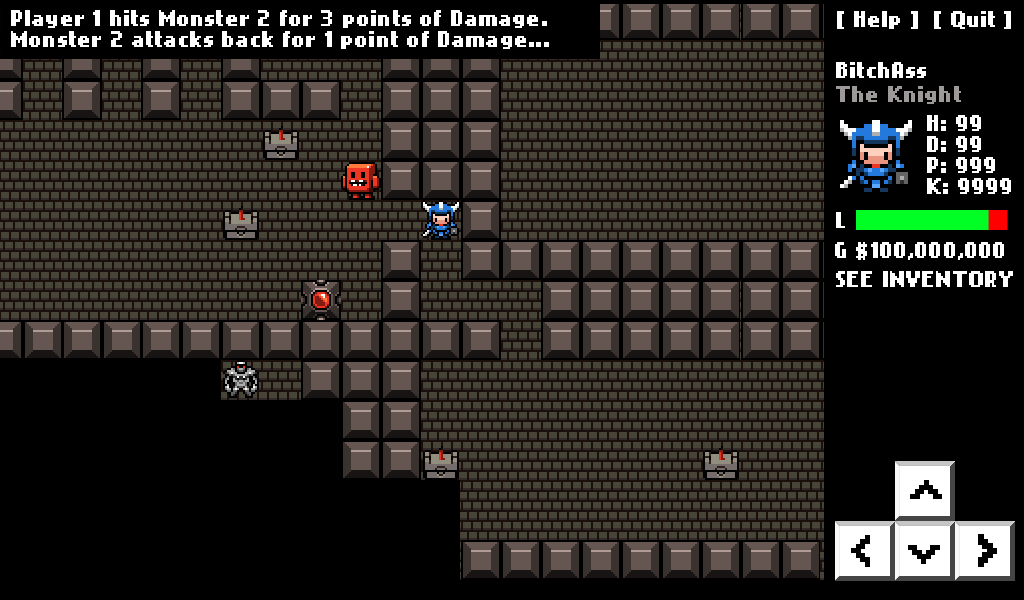
<style>
.page{position:relative;width:1024px;height:600px;background:#000000}
.page>*{position:absolute;margin:0}
.t1{font:18px/21px "NokiaCellphoneFC-Small";letter-spacing:0.01em;color:#ffffff}
.t2{font:18px "NokiaCellphoneFC-Small";letter-spacing:0.01em;color:#ffffff}
.t3{font:18px/24px "NokiaCellphoneFC-Small";letter-spacing:0.01em;color:#9d9999}
.t4{font:18px/24px "NokiaCellphoneFC-Small";letter-spacing:0.01em;color:#ffffff}
.t5{font:18px "NokiaCellphoneFC-Small";letter-spacing:0.01em;color:#ffffff;text-transform:uppercase}
.t6{font:36px "NokiaCellphoneFC-Small";letter-spacing:0.01em;color:#010101;font-weight:bold}
</style>
<div class="page">
<p class="t1" style="left:11px;top:10px;width:538px;height:39px">Player 1 hits Monster 2 for 3 points of Damage.<br>Monster 2 attacks back for 1 point of Damage...</p>
<p class="t2" style="left:837px;top:11px;width:174px;height:18px">[ Help ]  [ Quit ]</p>
<p class="t3" style="left:836px;top:62px;width:125px;height:42px"><span class="t4">BitchAss<br></span>The Knight</p>
<p class="t1" style="left:927px;top:115px;width:84px;height:79px">H: 99<br>D: 99<br>P: 999<br>K: 9999</p>
<p class="t2" style="left:836px;top:212px;width:9px;height:16px">L</p>
<p class="t2" style="left:835px;top:242px;width:169px;height:18px">G $100,000,000</p>
<p class="t5" style="left:836px;top:271px;width:177px;height:16px">SEE Inventory</p>
<p class="t6" style="left:910px;top:480px;width:32px;height:19px;rotate:-90deg">&gt;</p>
<p class="t6" style="left:978px;top:534px;width:19px;height:33px">&gt;</p>
<p class="t6" style="left:851px;top:535px;width:19px;height:32px;rotate:180deg">&gt;</p>
<p class="t6" style="left:908px;top:545px;width:32px;height:19px;rotate:90deg">&gt;</p>
</div>
